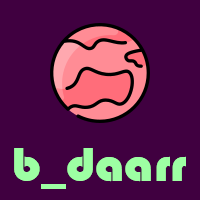
<style>
.page{position:relative;width:200px;height:200px;background:#400040}
.page>*{position:absolute;margin:0}
.t1{font:50px "Bauhaus93";color:#9dffa3}
</style>
<div class="page">
<p class="t1" style="left:14px;top:148px;width:172px;height:41px">b_daarr</p>
</div>
